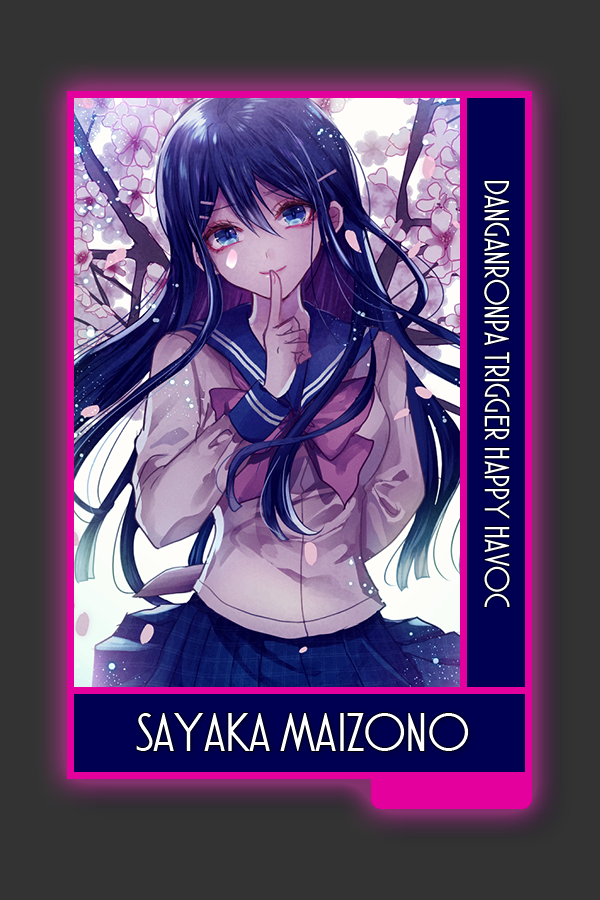
<style>
.page{position:relative;width:600px;height:900px;background:#333333}
.page>*{position:absolute;margin:0}
.t1{font:35px "AtlanticCruise";color:#ffffff}
.t2{font:55.1px "AtlanticCruise";color:#ffffff}
</style>
<div class="page">
<p class="t1" style="left:484px;top:180px;width:26px;height:428px;rotate:90deg">DANGANRONPA TRIGGER HAPPY HAVOC</p>
<p class="t2" style="left:136px;top:713px;width:333px;height:38px">SAYAKA MAIZONO</p>
</div>
